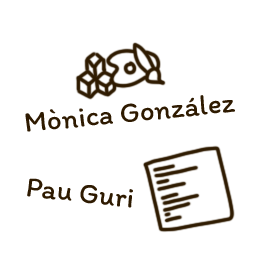
<style>
.page{position:relative;width:256px;height:256px;background:#ffffff}
.page>*{position:absolute;margin:0}
.t1{font:29.2px "Itim-Regular";color:#2e1a00}
</style>
<div class="page">
<p class="t1" style="left:25px;top:95px;width:210px;height:37px;rotate:-6deg">Mònica González</p>
<p class="t1" style="left:27px;top:178px;width:106px;height:30px;rotate:7deg">Pau Guri</p>
</div>
